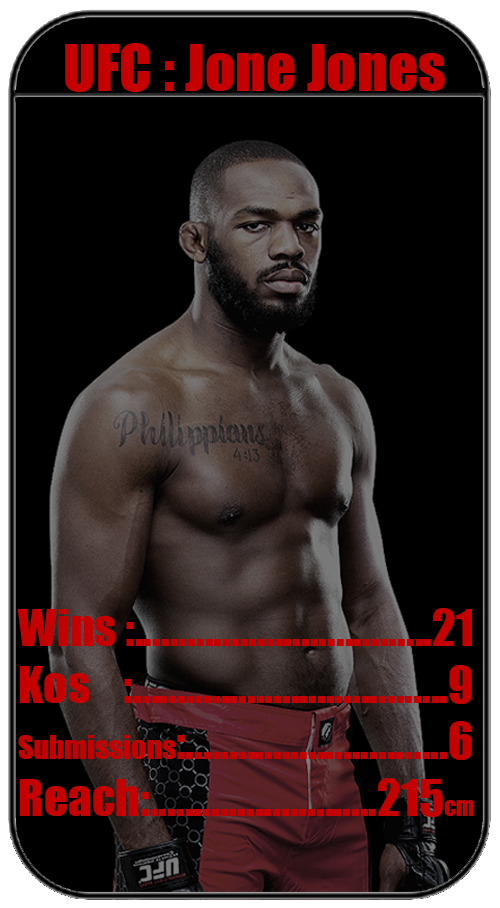
<style>
.page{position:relative;width:500px;height:908px;background:#000000}
.page>*{position:absolute;margin:0}
.t1{font:47.4px "Impact";color:#c60000}
.t2{font:59.3px "Impact";color:#c60000}
.t3{font:29.6px "Impact";color:#c60000}
.t4{font:23.7px "Impact";color:#c60000}
</style>
<div class="page">
<p class="t1" style="left:18px;top:43px;width:456px;height:774px;text-align:center"><span class="t2">UFC : Jone Jones<br><br><br><br><br><br><br><br></span>Wins :..................................21<br>Kos    :....................................9<br><span class="t3">Submissions</span>:..............................6<br>Reach:..........................215<span class="t4">cm</span></p>
</div>
